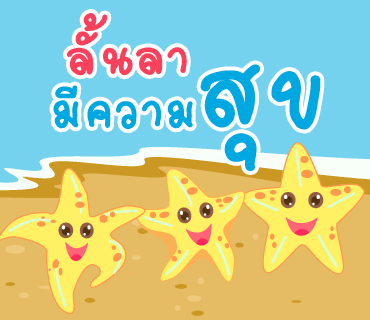
<style>
.page{position:relative;width:370px;height:320px;background:#75d2ee}
.page>*{position:absolute;margin:0}
.t1{font:75px "2005_iannnnnMTV";letter-spacing:0.025em;color:#fa405a;scale:1.06 1}
.t2{font:75px "2005_iannnnnMTV";letter-spacing:0.025em;color:#00a8e1;scale:1.06 1}
.t3{font:152px "2005_iannnnnMTV";letter-spacing:0.025em;color:#00a8e1;scale:1.06 1}
</style>
<div class="page">
<p class="t1" style="left:67px;top:13px;width:120px;height:63px">ลั้นลา</p>
<p class="t2" style="left:53px;top:64px;width:268px;height:107px">มีความ<span class="t3">สุข</span></p>
</div>
